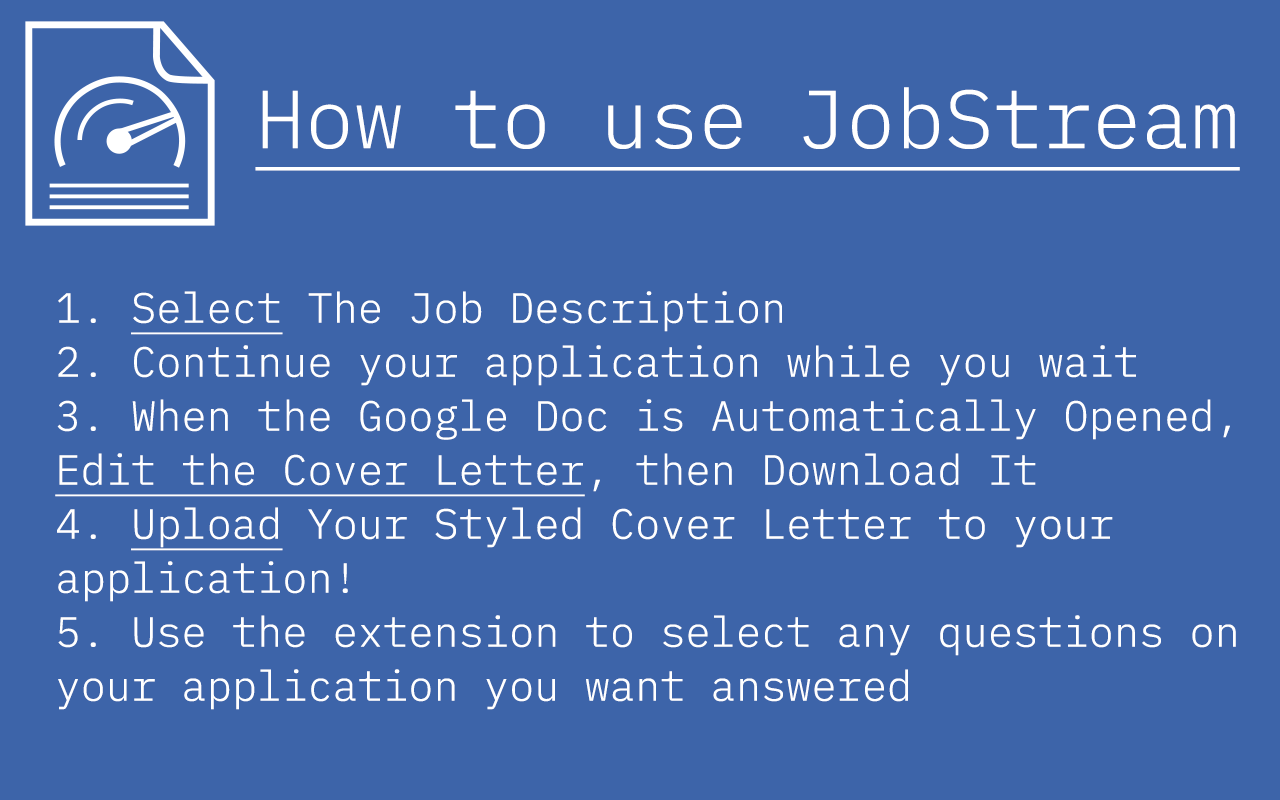
<style>
.page{position:relative;width:1280px;height:800px;background:#3d64a9}
.page>*{position:absolute;margin:0}
.t1{font:82px "IBMPlexMono-Light";color:#ffffff;text-decoration:underline}
.t2{font:42px/54px "IBMPlexMono-Light";color:#ffffff}
.t3{font:42px/54px "IBMPlexMono-Light";color:#ffffff;text-decoration:underline}
</style>
<div class="page">
<p class="t1" style="left:255px;top:87px;width:985px;height:84px">How to use JobStream</p>
<p class="t2" style="left:55px;top:291px;width:1181px;height:419px">1. <span class="t3">Select </span>The Job Description<br>2. Continue your application while you wait<br>3. When the Google Doc is Automatically Opened, <span class="t3">Edit the Cover Letter</span>, then Download It<br>4. <span class="t3">Upload</span> Your Styled Cover Letter to your application!<br>5. Use the extension to select any questions on your application you want answered</p>
</div>
